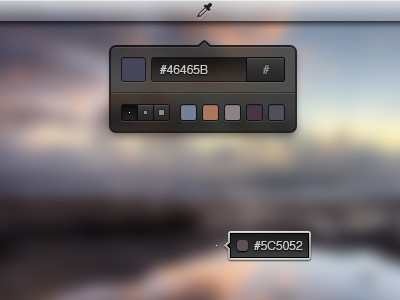
<style>
.page{position:relative;width:400px;height:300px}
.page>*{position:absolute;margin:0}
.t1{font:12px "Helvetica";color:#c9c9c9}
.t2{font:12px "Helvetica";color:#8d8d8d}
</style>
<div class="page">
<p class="t1" style="left:160px;top:65px;width:48px;height:9px">#46465B</p>
<p class="t2" style="left:262px;top:65px;width:8px;height:9px">#</p>
<p class="t1" style="left:254px;top:241px;width:49px;height:9px">#5C5052</p>
</div>
